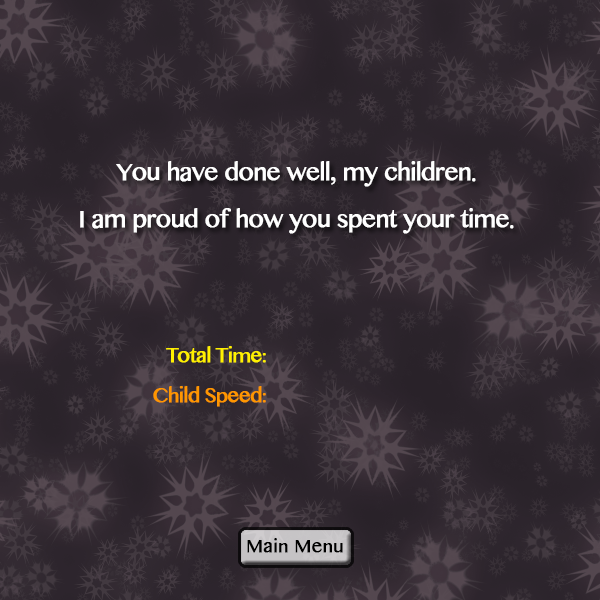
<style>
.page{position:relative;width:600px;height:600px}
.page>*{position:absolute;margin:0}
.t1{font:24px "LaoMN";letter-spacing:-0.04em;color:#ffffff;font-weight:bold}
.t2{font:20px "LaoMN";letter-spacing:-0.04em;color:#fff000;font-weight:bold}
.t3{font:20px "LaoMN";letter-spacing:-0.04em;color:#ff9600;font-weight:bold}
.t4{font:18px "LaoMN";color:#000000;font-weight:bold}
</style>
<div class="page">
<p class="t1" style="left:80px;top:161px;width:434px;height:73px;text-align:center">You have done well, my children.<br>I am proud of how you spent your time.</p>
<p class="t2" style="left:166px;top:346px;width:100px;height:17px">Total Time:</p>
<p class="t3" style="left:153px;top:386px;width:113px;height:21px">Child Speed:</p>
<p class="t4" style="left:247px;top:538px;width:96px;height:15px">Main Menu</p>
</div>
